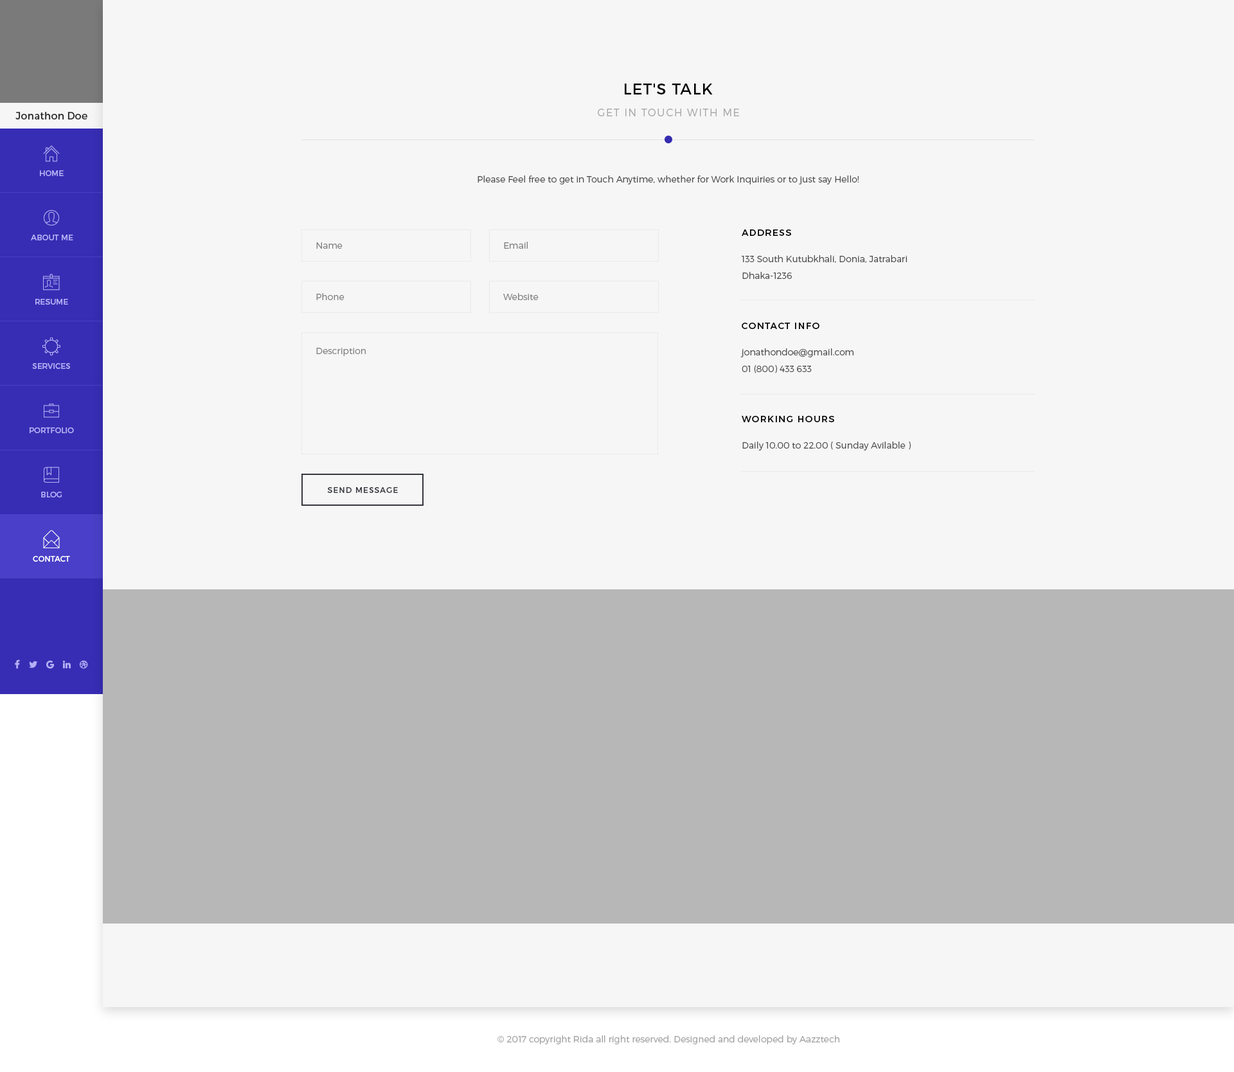
<style>
.page{position:relative;width:1234px;height:1072px;background:#f6f6f6}
.page>*{position:absolute;margin:0}
.t1{font:15.4px "Montserrat-Regular";letter-spacing:0.05em;color:#000000;text-transform:uppercase}
.t2{font:10.3px "Montserrat-Regular";color:#2a2a2a}
.t3{font:10.3px "Montserrat-Light";letter-spacing:0.1em;color:#a8a8a8;text-transform:uppercase}
.t4{font:7.7px "Montserrat-Regular";color:#b5b0f7;text-transform:uppercase}
.t5{font:9px "Montserrat-Light";color:#4c4c4c}
.t6{font:9px/16.7px "Montserrat-Light";color:#4c4c4c}
.t7{font:9px/16.7px "Montserrat-Regular";letter-spacing:0.1em;color:#000000}
.t8{font:9px "Montserrat-Light";color:#7e7e7e}
.t9{font:7.7px "Montserrat-Regular";letter-spacing:0.1em;color:#35373e;text-transform:uppercase}
.t10{font:7.7px "Montserrat-Regular";color:#fefeff;text-transform:uppercase}
.t11{font:9px "Montserrat-Light";color:#9f9f9f}
</style>
<div class="page">
<p class="t1" style="left:625px;top:84px;width:88px;height:10px">LET'S TALK</p>
<p class="t2" style="left:15px;top:112px;width:72px;height:8px">Jonathon Doe</p>
<p class="t3" style="left:598px;top:109px;width:141px;height:7px">Get in touch with me</p>
<p class="t4" style="left:40px;top:170px;width:24px;height:6px">HOME</p>
<p class="t5" style="left:478px;top:176px;width:381px;height:8px">Please Feel free to get in Touch Anytime, whether for Work Inquiries or to just say Hello!</p>
<p class="t6" style="left:741px;top:230px;width:170px;height:221px"><span class="t7">ADDRESS<br><br></span>133 South Kutubkhali, Donia, Jatrabari<br>Dhaka-1236<br><br><br><span class="t7">CONTACT INFO<br><br></span>jonathondoe@gmail.com<br>01 (800) 433 633<br><br><br><span class="t7">WORKING HOURS<br><br></span>Daily 10.00 to 22.00 ( Sunday Avilable )</p>
<p class="t4" style="left:31px;top:235px;width:42px;height:5px">about me</p>
<p class="t8" style="left:316px;top:242px;width:27px;height:7px">Name</p>
<p class="t8" style="left:504px;top:242px;width:24px;height:7px">Email</p>
<p class="t8" style="left:316px;top:293px;width:29px;height:7px">Phone</p>
<p class="t8" style="left:503px;top:293px;width:36px;height:7px">Website</p>
<p class="t4" style="left:35px;top:299px;width:33px;height:6px">resume</p>
<p class="t8" style="left:316px;top:348px;width:50px;height:8px">Description</p>
<p class="t4" style="left:32px;top:363px;width:38px;height:6px">services</p>
<p class="t4" style="left:30px;top:428px;width:44px;height:5px">portfolio</p>
<p class="t4" style="left:41px;top:492px;width:21px;height:6px">blog</p>
<p class="t9" style="left:327px;top:487px;width:71px;height:6px">send message</p>
<p class="t10" style="left:33px;top:556px;width:37px;height:6px">contact</p>
<p class="t11" style="left:498px;top:1036px;width:342px;height:9px">© 2017 copyright Rida all right reserved. Designed and developed by Aazztech</p>
</div>
